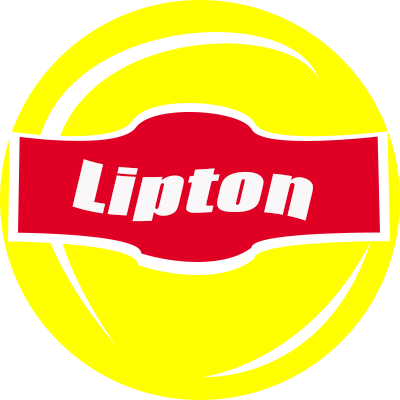
<style>
.page{position:relative;width:400px;height:400px;background:#ffff00}
.page>*{position:absolute;margin:0}
.t1{font:61.4px "Impact";color:#faf7f8;scale:1.54 1}
</style>
<div class="page">
<p class="t1" style="left:72px;top:159px;width:241px;height:63px;rotate:14deg">Lipton</p>
</div>
